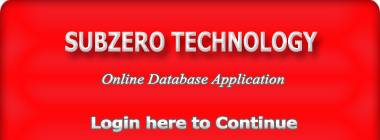
<style>
.page{position:relative;width:380px;height:140px}
.page>*{position:absolute;margin:0}
.t1{font:26.6px "Tahoma-Bold";scale:0.79 1}
.t2{font:14.2px "TimesNewRomanPS-ItalicMT";color:#ffffff;scale:1.1 1}
.t3{font:15.5px "Tahoma-Bold";color:#ebebeb;scale:1.17 1}
</style>
<div class="page">
<p class="t1" style="left:65px;top:31px;width:253px;height:21px">SUBZERO TECHNOLOGY</p>
<p class="t2" style="left:102px;top:73px;width:182px;height:14px">Online Database Application</p>
<p class="t3" style="left:91px;top:116px;width:206px;height:16px">Login here to Continue</p>
</div>
